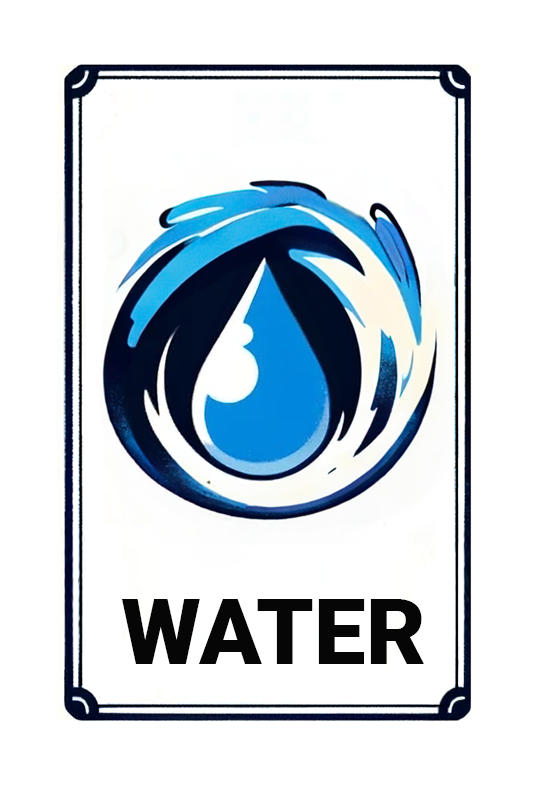
<style>
.page{position:relative;width:534px;height:785px;background:#ffffff}
.page>*{position:absolute;margin:0}
.t1{font:92px "Roboto-Black";color:#060606}
</style>
<div class="page">
<p class="t1" style="left:121px;top:599px;width:303px;height:65px">WATER</p>
</div>
